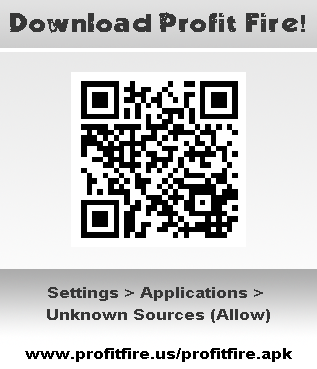
<style>
.page{position:relative;width:317px;height:369px;background:#ffffff}
.page>*{position:absolute;margin:0}
.t1{font:23.4px "Decade";color:#373737;scale:1.19 1}
.t2{font:23.4px "Arial-BoldMT";color:#373737;scale:1.19 1}
.t3{font:15.1px "Arial-BoldMT";color:#373737;scale:1.19 1}
.t4{font:15.1px "Arial-BoldMT";color:#000000;scale:1.19 1}
</style>
<div class="page">
<p class="t1" style="left:10px;top:12px;width:295px;height:21px">Download Profit Fire<span class="t2">!</span></p>
<p class="t3" style="left:47px;top:287px;width:223px;height:36px;text-align:center">Settings &gt; Applications &gt; <br>Unknown Sources (Allow)</p>
<p class="t4" style="left:25px;top:348px;width:267px;height:14px">www.profitfire.us/profitfire.apk</p>
</div>
